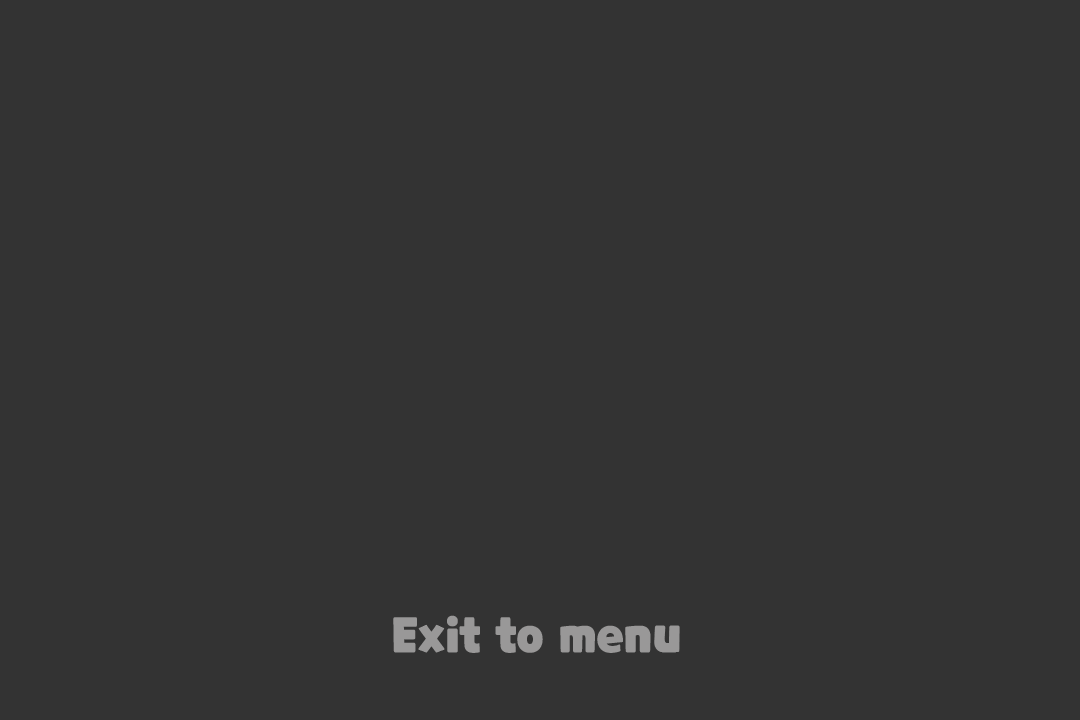
<style>
.page{position:relative;width:1080px;height:720px;background:#333333}
.page>*{position:absolute;margin:0}
.t1{font:48px "CookieRun-Black";color:#999898}
</style>
<div class="page">
<p class="t1" style="left:393px;top:615px;width:287px;height:38px">Exit to menu</p>
</div>
